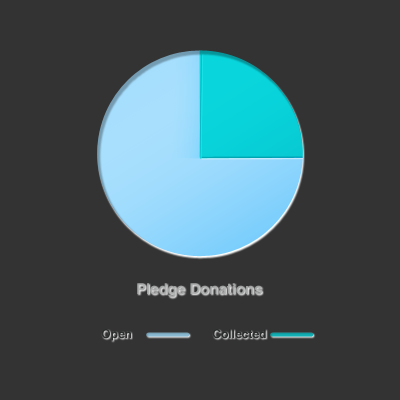
<style>
.page{position:relative;width:400px;height:400px;background:#333333}
.page>*{position:absolute;margin:0}
.t1{font:15px "Helvetica-Bold";color:#abacac}
.t2{font:12px "Helvetica-Bold";color:#2d2d2d}
</style>
<div class="page">
<p class="t1" style="left:137px;top:283px;width:125px;height:15px">Pledge Donations</p>
<p class="t2" style="left:101px;top:329px;width:30px;height:12px">Open</p>
<p class="t2" style="left:212px;top:329px;width:54px;height:10px">Collected</p>
</div>
